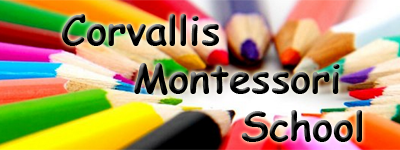
<style>
.page{position:relative;width:400px;height:150px}
.page>*{position:absolute;margin:0}
.t1{font:40px "ComicSansMS-Bold";color:#000000}
</style>
<div class="page">
<p class="t1" style="left:62px;top:14px;width:300px;height:128px">Corvallis<br>  Montessori<br>     School</p>
</div>
